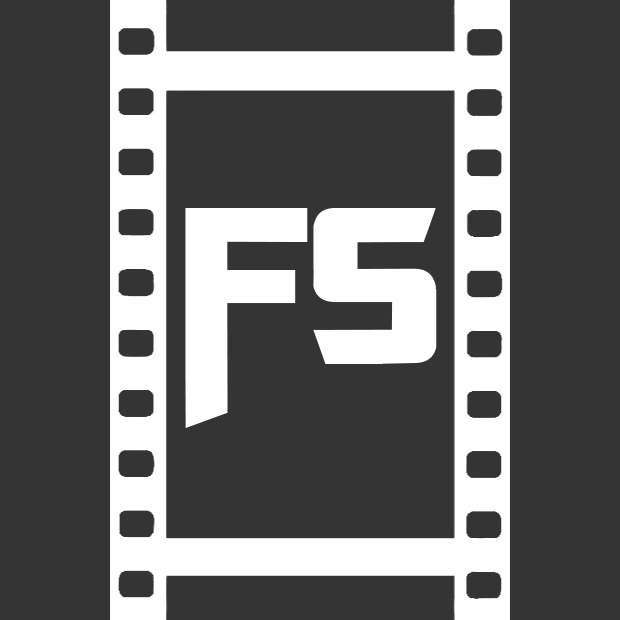
<style>
.page{position:relative;width:620px;height:620px;background:#343434}
.page>*{position:absolute;margin:0}
.t1{font:250px "Transformers";color:#ffffff}
</style>
<div class="page">
<p class="t1" style="left:185px;top:208px;width:252px;height:220px">fs</p>
</div>
